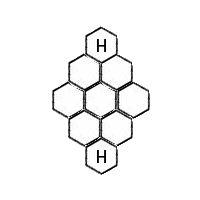
<style>
.page{position:relative;width:200px;height:200px;background:#ffffff}
.page>*{position:absolute;margin:0}
.t1{font:18px "MyriadPro-Regular";color:#000000}
</style>
<div class="page">
<p class="t1" style="left:97px;top:39px;width:9px;height:13px">H</p>
<p class="t1" style="left:97px;top:150px;width:9px;height:13px">H</p>
</div>
